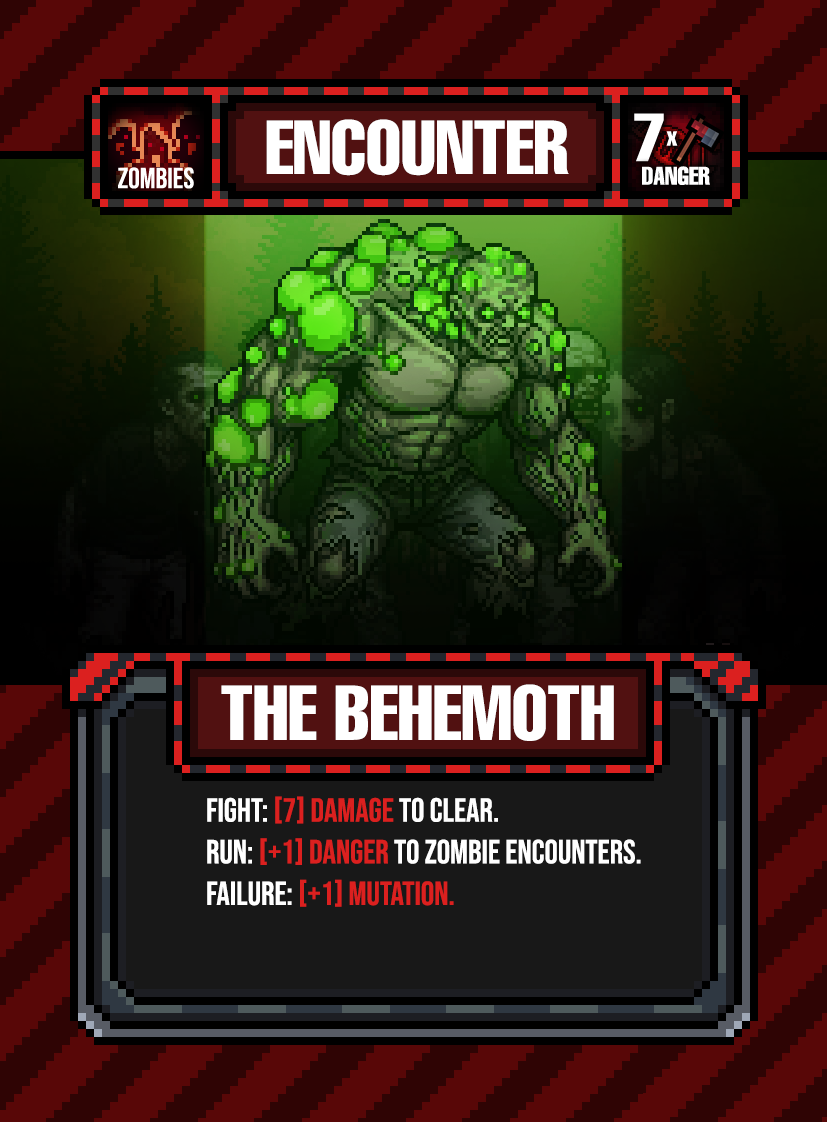
<style>
.page{position:relative;width:827px;height:1122px}
.page>*{position:absolute;margin:0}
.t1{font:75px "HelveticaLTPro-Compressed";color:#ffffff}
.t2{font:76.2px "HelveticaLTPro-Compressed";color:#ffffff}
.t3{font:33.3px/33.3px "BebasNeue-Regular";color:#ffffff}
.t4{font:33.3px/41.7px "BebasNeue-Regular";color:#ffffff}
.t5{font:33.3px/41.7px "BebasNeue-Regular";color:#db201f}
.t6{font:33.3px/33.3px "BebasNeue-Regular";color:#db201f}
</style>
<div class="page">
<p class="t1" style="left:266px;top:119px;width:303px;height:57px">ENCOUNTER</p>
<p class="t2" style="left:221px;top:684px;width:393px;height:57px">THE BEHEMOTH</p>
<p class="t3" style="left:207px;top:796px;width:434px;height:111px"><span class="t4">FIGHT: </span><span class="t5">[7] Damage</span><span class="t4"> to clear.<br>RUN: </span><span class="t6">[+1] Danger </span>to zombie encounters.<br><span class="t4">failure: </span><span class="t5">[+1] MUTATION.</span></p>
</div>
